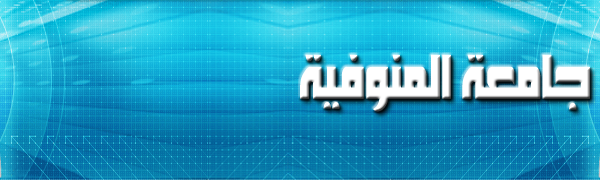
<style>
.page{position:relative;width:600px;height:180px}
.page>*{position:absolute;margin:0}
.t1{font:60.5px "Mohammad-Annoktah";color:#ffffff;scale:0.6 1}
</style>
<div class="page">
<p class="t1" style="left:300px;top:54px;width:290px;height:58px">جامعة المنوفية</p>
</div>
